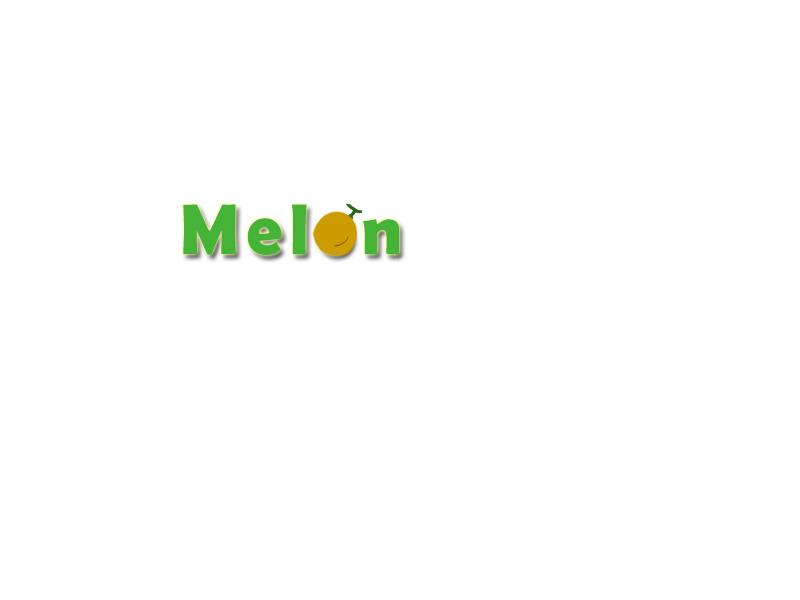
<style>
.page{position:relative;width:800px;height:600px;background:#ffffff}
.page>*{position:absolute;margin:0}
.t1{font:72px "BerlinSansFBDemi-Bold";letter-spacing:0.1em;color:#44b336}
</style>
<div class="page">
<p class="t1" style="left:183px;top:204px;width:216px;height:51px">Melon</p>
</div>
